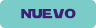
<style>
.page{position:relative;width:96px;height:28px;background:#7accc8}
.page>*{position:absolute;margin:0}
.t1{font:14px "STARWARS";color:#3d2078}
</style>
<div class="page">
<p class="t1" style="left:21px;top:8px;width:55px;height:11px">NUEVO</p>
</div>
